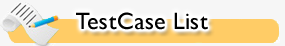
<style>
.page{position:relative;width:285px;height:46px;background:#f6f6f6}
.page>*{position:absolute;margin:0}
.t1{font:24px "GillSansMT";letter-spacing:0.075em;color:#000000}
</style>
<div class="page">
<p class="t1" style="left:76px;top:12px;width:132px;height:18px">TestCase List</p>
</div>
